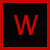
<style>
.page{position:relative;width:50px;height:50px;background:#040404}
.page>*{position:absolute;margin:0}
.t1{font:27.6px "LucidaGrande";color:#c70505}
</style>
<div class="page">
<p class="t1" style="left:14px;top:15px;width:24px;height:20px">W</p>
</div>
